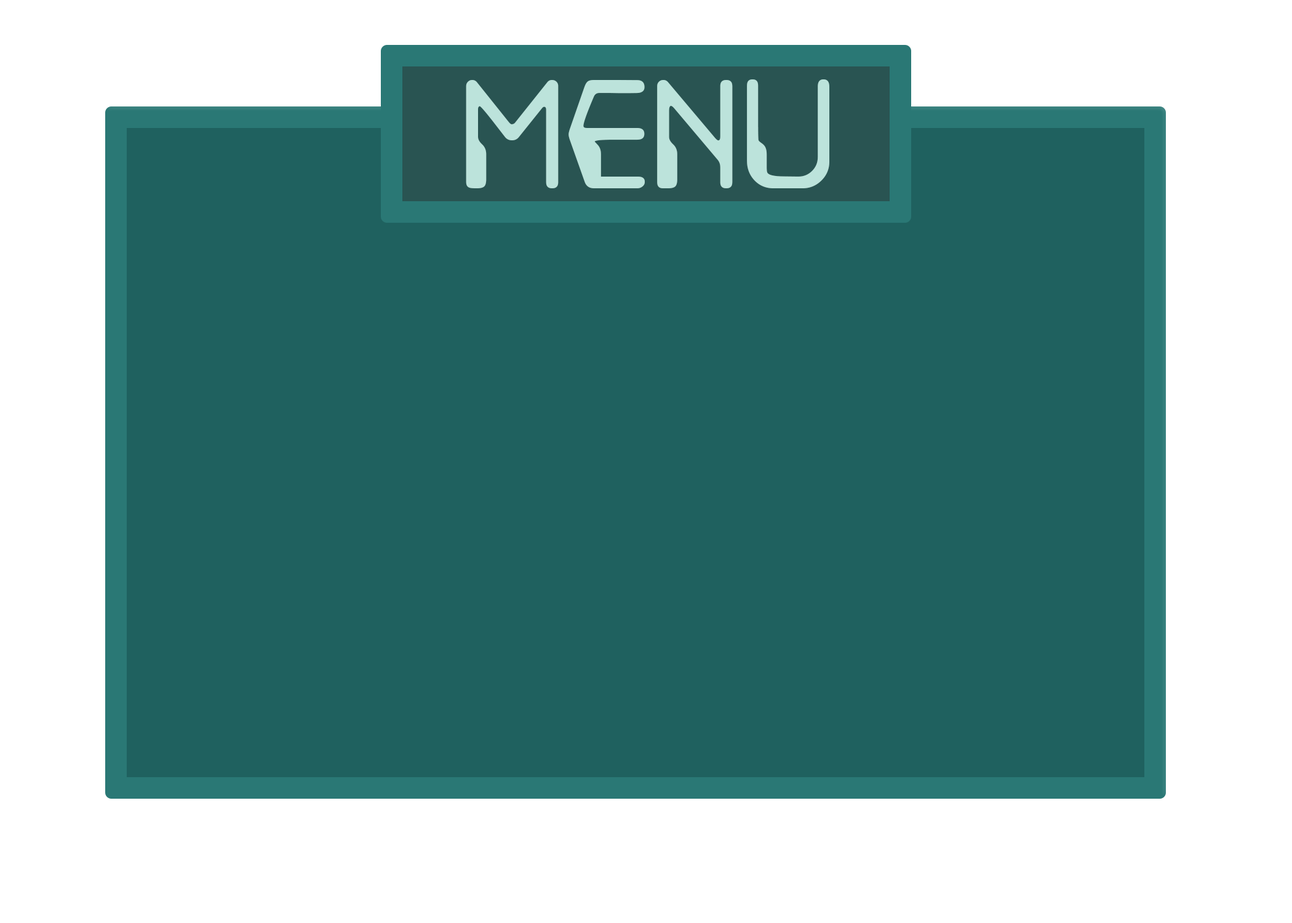
<style>
.page{position:relative;width:1292px;height:923px;background:#1f615f}
.page>*{position:absolute;margin:0}
.t1{font:153.8px "DestructoBeamBB";color:#bce3db}
</style>
<div class="page">
<p class="t1" style="left:466px;top:79px;width:363px;height:109px">Menu</p>
</div>
